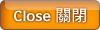
<style>
.page{position:relative;width:100px;height:30px}
.page>*{position:absolute;margin:0}
.t1{font:14px "BritishCouncilSans-Bold";color:#ffffff}
.t2{font:16px "DFHeiStd-W7";color:#ffffff}
</style>
<div class="page">
<p class="t1" style="left:14px;top:8px;width:72px;height:15px">Close <span class="t2">關閉</span></p>
</div>
